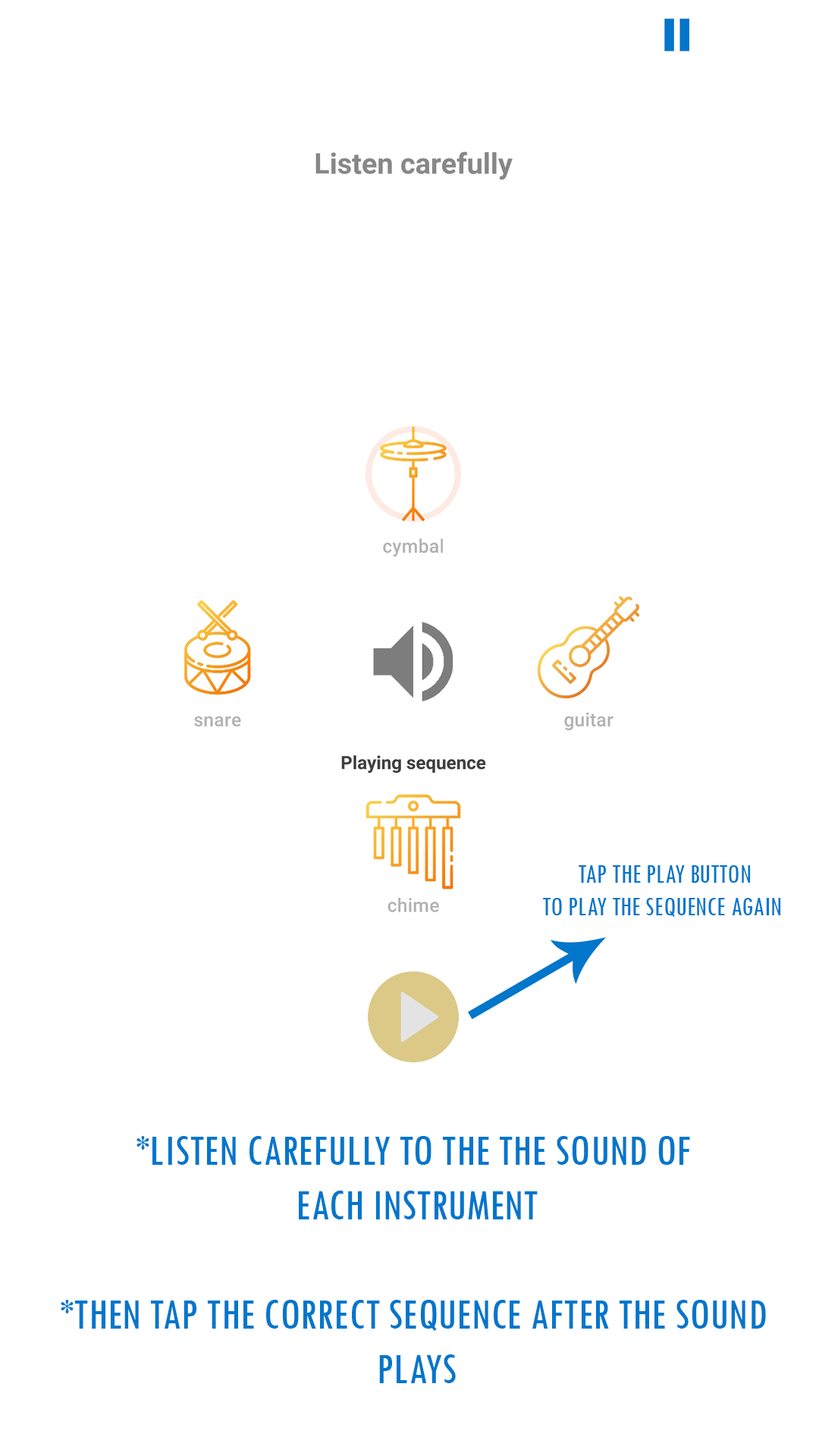
<style>
.page{position:relative;width:819px;height:1456px;background:#ffffff}
.page>*{position:absolute;margin:0}
.t1{font:27.3px "TwCenMT-Condensed";color:#0276cb}
.t2{font:45.5px "TwCenMT-Condensed";color:#0276cb}
</style>
<div class="page">
<p class="t1" style="left:543px;top:865px;width:238px;height:52px;text-align:center">TAP THE PLAY BUTTON<br>TO PLAY THE SEQUENCE AGAIN</p>
<p class="t2" style="left:61px;top:1136px;width:705px;height:247px;text-align:center">*LISTEN CAREFULLY TO THE THE SOUND OF <br>EACH INSTRUMENT<br><br>*THEN TAP THE CORRECT SEQUENCE AFTER THE SOUND <br>PLAYS</p>
</div>
